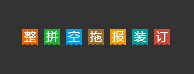
<style>
.page{position:relative;width:194px;height:74px;background:#333333}
.page>*{position:absolute;margin:0}
.t1{font:12px "MicrosoftYaHei";color:#ffffff}
</style>
<div class="page">
<p class="t1" style="left:24px;top:31px;width:12px;height:11px">整</p>
<p class="t1" style="left:46px;top:31px;width:12px;height:11px">拼</p>
<p class="t1" style="left:68px;top:31px;width:12px;height:11px">空</p>
<p class="t1" style="left:90px;top:31px;width:12px;height:11px">拖</p>
<p class="t1" style="left:112px;top:31px;width:12px;height:11px">报</p>
<p class="t1" style="left:134px;top:31px;width:12px;height:11px">装</p>
<p class="t1" style="left:156px;top:31px;width:12px;height:11px">订</p>
</div>
